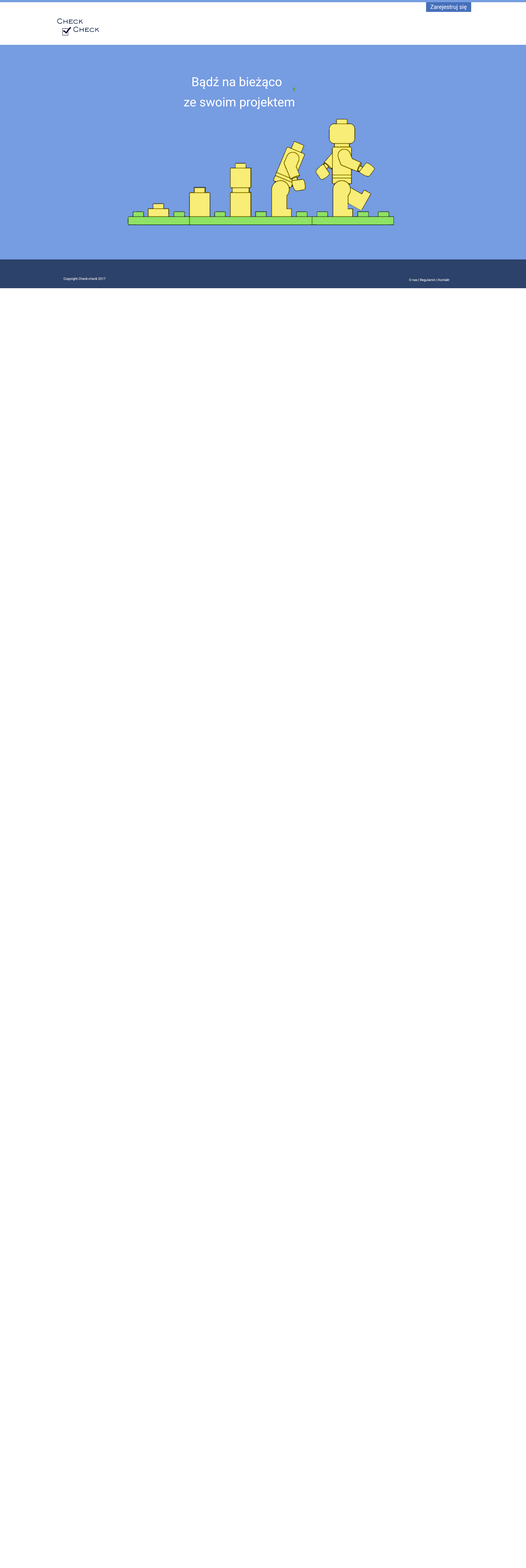
<style>
.page{position:relative;width:526px;height:1568px;background:#ffffff}
.page>*{position:absolute;margin:0}
.t1{font:5.8px "Roboto-Regular";color:#ffffff}
.t2{font:9.7px "EngraversGothicBT-Regular";color:#0e2652}
.t3{font:12.4px "Roboto-Regular";color:#ffffff}
.t4{font:3.3px "Roboto-Regular";color:#ffffff}
</style>
<div class="page">
<p class="t1" style="left:430px;top:5px;width:36px;height:5px">Zarejestruj się</p>
<p class="t2" style="left:57px;top:18px;width:26px;height:6px">Check</p>
<p class="t2" style="left:73px;top:27px;width:26px;height:5px">Check</p>
<p class="t3" style="left:192px;top:77px;width:89px;height:12px">Bądź na bieżąco</p>
<p class="t3" style="left:184px;top:97px;width:110px;height:12px">ze swoim projektem</p>
<p class="t4" style="left:64px;top:277px;width:41px;height:4px">Copyright Check-check 2017</p>
<p class="t4" style="left:409px;top:278px;width:40px;height:4px">O nas | Regulamin | Kontakt</p>
</div>
